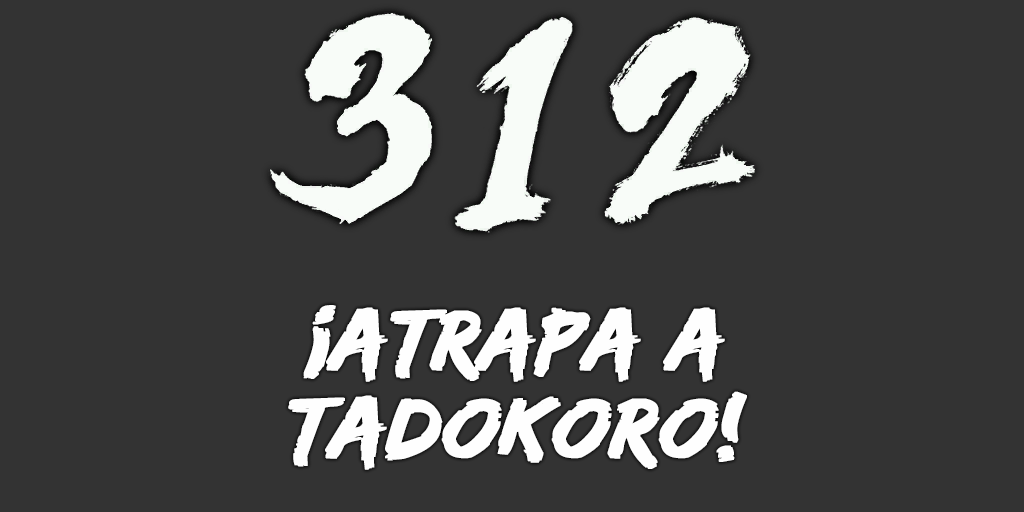
<style>
.page{position:relative;width:1024px;height:512px;background:#333333}
.page>*{position:absolute;margin:0}
.t1{font:88px/88px "EdoSZ";color:#fefefe;font-weight:bold;font-style:italic;scale:1.04 1}
</style>
<div class="page">
<p class="t1" style="left:288px;top:305px;width:459px;height:165px;text-align:center">¡atrapa a<br>tadokoro!</p>
</div>
